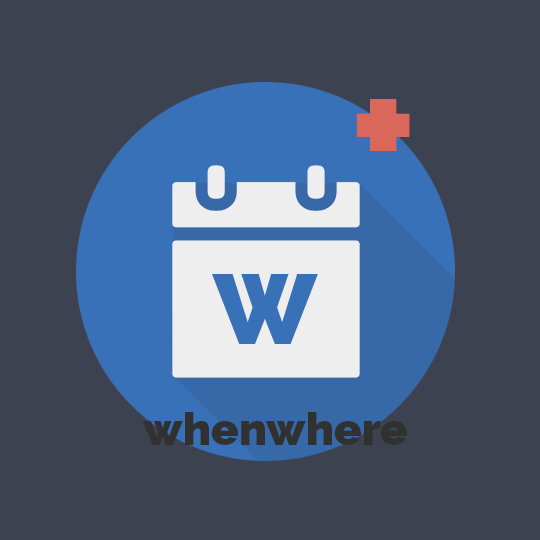
<style>
.page{position:relative;width:540px;height:540px;background:#3c424f}
.page>*{position:absolute;margin:0}
.t1{font:154.3px "Raleway-Heavy";color:#d9685a}
.t2{font:98.3px "Raleway-Heavy";color:#3871b8}
.t3{font:45px "Raleway-Heavy";color:#313131}
</style>
<div class="page">
<p class="t1" style="left:356px;top:99px;width:54px;height:52px">+</p>
<p class="t2" style="left:212px;top:274px;width:106px;height:70px">W</p>
<p class="t3" style="left:142px;top:412px;width:265px;height:33px">whenwhere</p>
</div>
